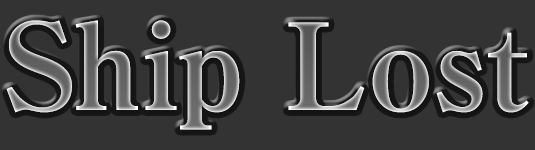
<style>
.page{position:relative;width:535px;height:150px;background:#333333}
.page>*{position:absolute;margin:0}
.t1{font:120px "RyuminPro-ExBold"}
</style>
<div class="page">
<p class="t1" style="left:6px;top:20px;width:523px;height:110px">Ship Lost</p>
</div>
